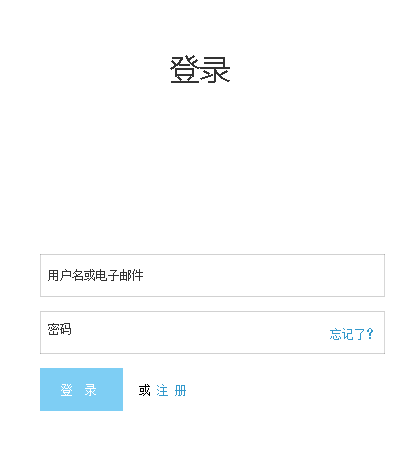
<style>
.page{position:relative;width:420px;height:456px;background:#ffffff}
.page>*{position:absolute;margin:0}
.t1{font:30px "MicrosoftYaHei";color:#333333}
.t2{font:12px "SimSun";color:#333333}
.t3{font:12px "SimSun";color:#3399cc}
.t4{font:12px "SimSun";color:#ffffff}
.t5{font:12px "SimSun";color:#000000}
</style>
<div class="page">
<p class="t1" style="left:170px;top:55px;width:60px;height:28px">登录</p>
<p class="t2" style="left:48px;top:269px;width:95px;height:12px">用户名或电子邮件</p>
<p class="t2" style="left:48px;top:323px;width:23px;height:12px">密码</p>
<p class="t3" style="left:330px;top:328px;width:43px;height:12px">忘记了？</p>
<p class="t4" style="left:61px;top:384px;width:125px;height:12px">登  录       <span class="t5">或</span><span class="t3"> 注 册</span></p>
</div>
